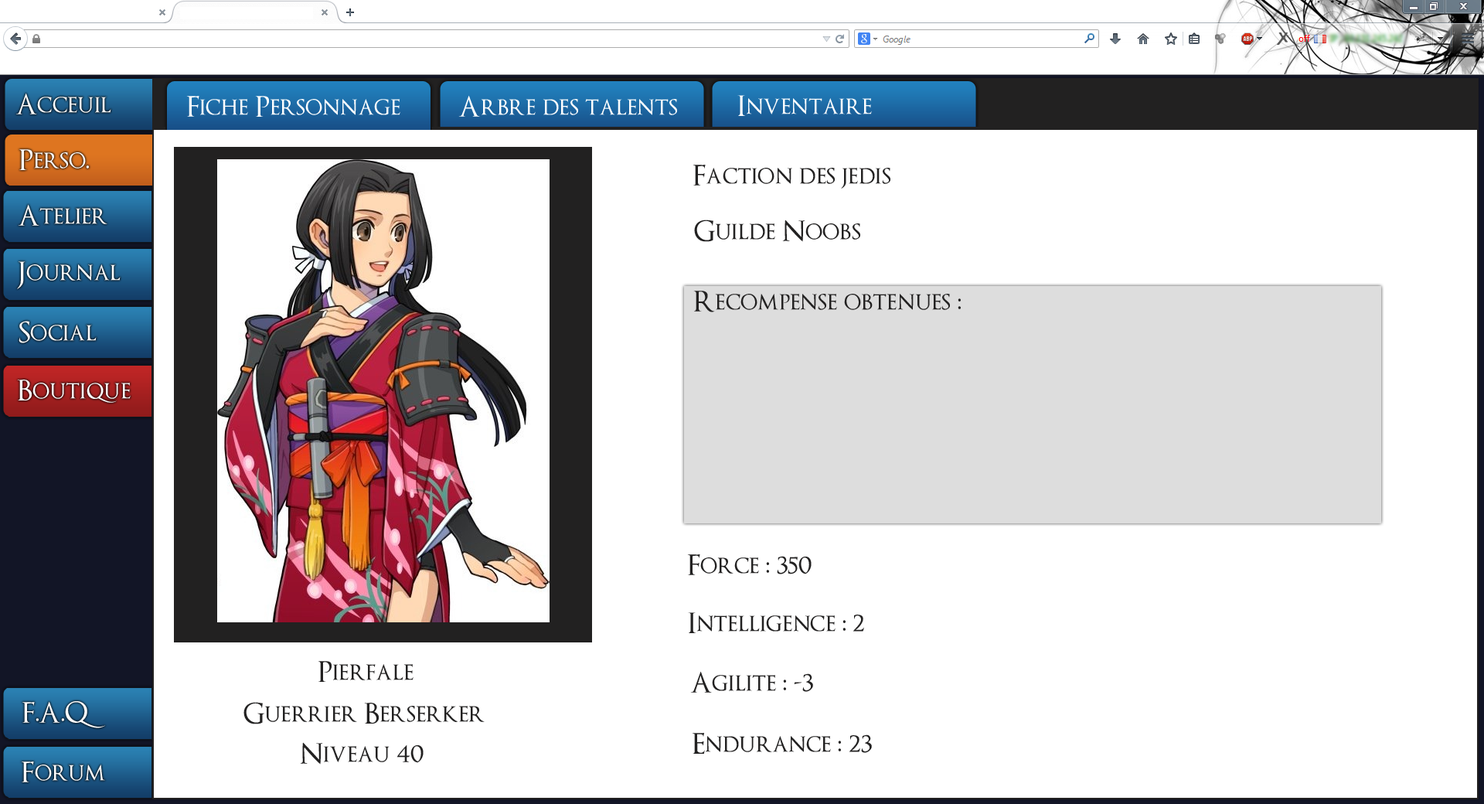
<style>
.page{position:relative;width:1484px;height:804px;background:#ffffff}
.page>*{position:absolute;margin:0}
.t1{font:27.8px "OptimusPrinceps";color:#ffffff}
.t2{font:27.8px "OptimusPrinceps";color:#222121}
</style>
<div class="page">
<p class="t1" style="left:15px;top:93px;width:96px;height:21px">Acceuil</p>
<p class="t1" style="left:186px;top:96px;width:214px;height:21px">Fiche Personnage</p>
<p class="t1" style="left:458px;top:95px;width:219px;height:22px">Arbre des talents</p>
<p class="t1" style="left:737px;top:95px;width:135px;height:21px">Inventaire</p>
<p class="t1" style="left:19px;top:149px;width:70px;height:21px">Perso.</p>
<p class="t2" style="left:692px;top:165px;width:198px;height:24px">Faction des jedis</p>
<p class="t1" style="left:18px;top:204px;width:89px;height:22px">Atelier</p>
<p class="t2" style="left:694px;top:219px;width:166px;height:23px">Guilde Noobs</p>
<p class="t1" style="left:17px;top:261px;width:104px;height:28px">Journal</p>
<p class="t2" style="left:693px;top:291px;width:268px;height:21px">Recompense obtenues :</p>
<p class="t1" style="left:19px;top:321px;width:78px;height:22px">Social</p>
<p class="t1" style="left:17px;top:379px;width:114px;height:24px">Boutique</p>
<p class="t2" style="left:687px;top:554px;width:124px;height:21px">Force : 350</p>
<p class="t2" style="left:688px;top:612px;width:176px;height:21px">Intelligence : 2</p>
<p class="t2" style="left:318px;top:661px;width:95px;height:21px">Pierfale</p>
<p class="t2" style="left:690px;top:671px;width:123px;height:21px">Agilite : -3</p>
<p class="t1" style="left:22px;top:701px;width:83px;height:27px">F.A.Q</p>
<p class="t2" style="left:243px;top:702px;width:242px;height:22px">Guerrier Berserker</p>
<p class="t2" style="left:692px;top:733px;width:180px;height:20px">Endurance : 23</p>
<p class="t2" style="left:300px;top:742px;width:123px;height:22px">Niveau 40</p>
<p class="t1" style="left:21px;top:761px;width:84px;height:21px">Forum</p>
</div>
